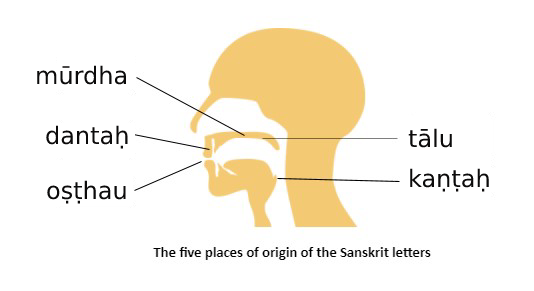
<style>
.page{position:relative;width:534px;height:291px;background:#ffffff}
.page>*{position:absolute;margin:0}
.t1{font:24px "DejaVuSans";color:#0c0b0b}
</style>
<div class="page">
<p class="t1" style="left:37px;top:65px;width:90px;height:20px">mūrdha</p>
<p class="t1" style="left:46px;top:125px;width:82px;height:24px">dantaḥ</p>
<p class="t1" style="left:408px;top:128px;width:44px;height:20px">tālu</p>
<p class="t1" style="left:410px;top:168px;width:79px;height:24px">kaṇṭaḥ</p>
<p class="t1" style="left:47px;top:180px;width:79px;height:24px">oṣṭhau</p>
</div>
